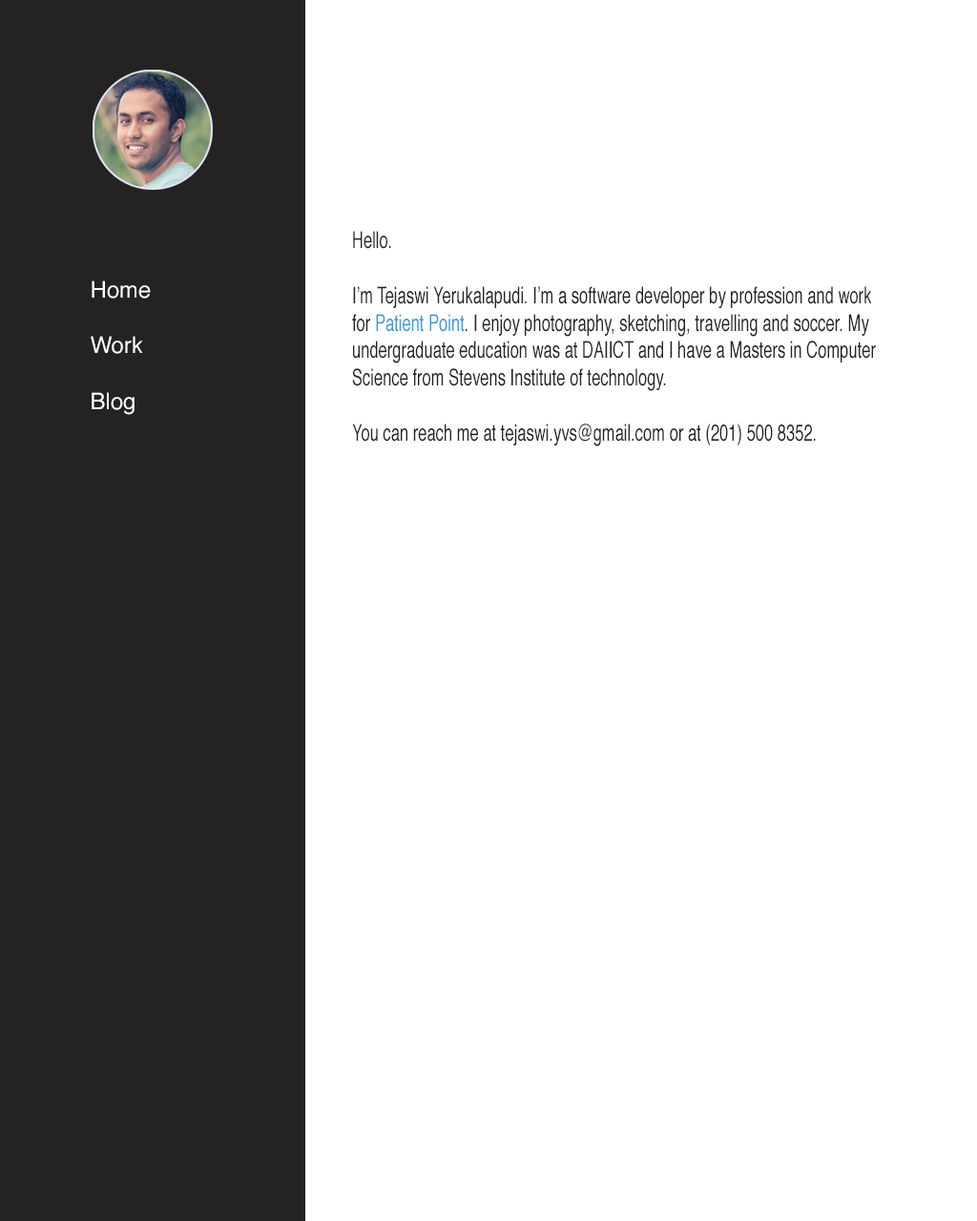
<style>
.page{position:relative;width:977px;height:1221px;background:#ffffff}
.page>*{position:absolute;margin:0}
.t1{font:22.9px "Helvetica";color:#242223;scale:0.69 1}
.t2{font:22.9px "Helvetica";color:#369ae0;scale:0.69 1}
.t3{font:22.9px "Helvetica";color:#ffffff}
</style>
<div class="page">
<p class="t1" style="left:352px;top:231px;width:524px;height:215px">Hello.<br><br>I’m Tejaswi Yerukalapudi. I’m a software developer by profession and work for <span class="t2">Patient Point</span>. I enjoy photography, sketching, travelling and soccer. My undergraduate education was at DAIICT and I have a Masters in Computer Science from Stevens Institute of technology.<br><br>You can reach me at tejaswi.yvs@gmail.com or at (201) 500 8352.</p>
<p class="t3" style="left:92px;top:280px;width:59px;height:19px">Home</p>
<p class="t3" style="left:91px;top:336px;width:52px;height:18px">Work</p>
<p class="t3" style="left:92px;top:392px;width:42px;height:23px">Blog</p>
</div>
